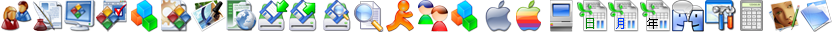
<style>
.page{position:relative;width:832px;height:32px;background:#ffffff}
.page>*{position:absolute;margin:0}
.t1{font:12px "SimSun";letter-spacing:0.2em;color:#008006}
.t2{font:12px "SimSun";letter-spacing:0.2em;color:#003cff}
.t3{font:12px "SimSun";letter-spacing:0.2em;color:#000000}
</style>
<div class="page">
<p class="t1" style="left:586px;top:18px;width:8px;height:11px">日</p>
<p class="t2" style="left:616px;top:18px;width:8px;height:11px">月</p>
<p class="t3" style="left:647px;top:18px;width:11px;height:11px">年</p>
</div>
